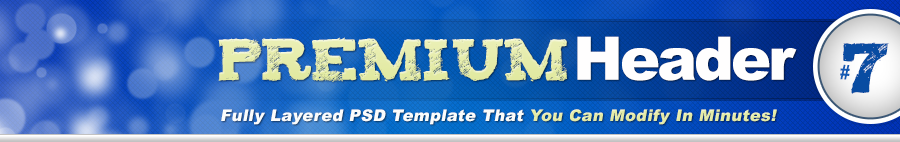
<style>
.page{position:relative;width:900px;height:142px}
.page>*{position:absolute;margin:0}
.t1{font:48px "Tiza";color:#e7edaf;text-transform:uppercase}
.t2{font:60px "Arial-Black";letter-spacing:-0.05em;color:#fffefe}
.t3{font:59.7px "Tiza";letter-spacing:-0.05em;color:#094ca2;scale:0.87 1}
.t4{font:19.7px "Arial-BoldMT";letter-spacing:-0.05em;color:#145bb4;scale:0.87 1}
.t5{font:16px "Arial-Black";letter-spacing:0.025em;color:#fafcfc;font-style:italic}
.t6{font:16px "Arial-Black";letter-spacing:0.025em;color:#fafcfa;font-style:italic}
.t7{font:16px "Arial-Black";letter-spacing:0.025em;color:#e3eba5;font-style:italic}
</style>
<div class="page">
<p class="t1" style="left:218px;top:37px;width:349px;height:45px">Premium</p>
<p class="t2" style="left:577px;top:36px;width:220px;height:45px">Header</p>
<p class="t3" style="left:843px;top:42px;width:46px;height:52px;rotate:3deg">7</p>
<p class="t4" style="left:840px;top:64px;width:10px;height:16px;rotate:3deg">#</p>
<p class="t5" style="left:221px;top:109px;width:556px;height:16px">Fully Layered PSD Template <span class="t6">That </span><span class="t7">You Can Modify In Minutes!</span></p>
</div>
